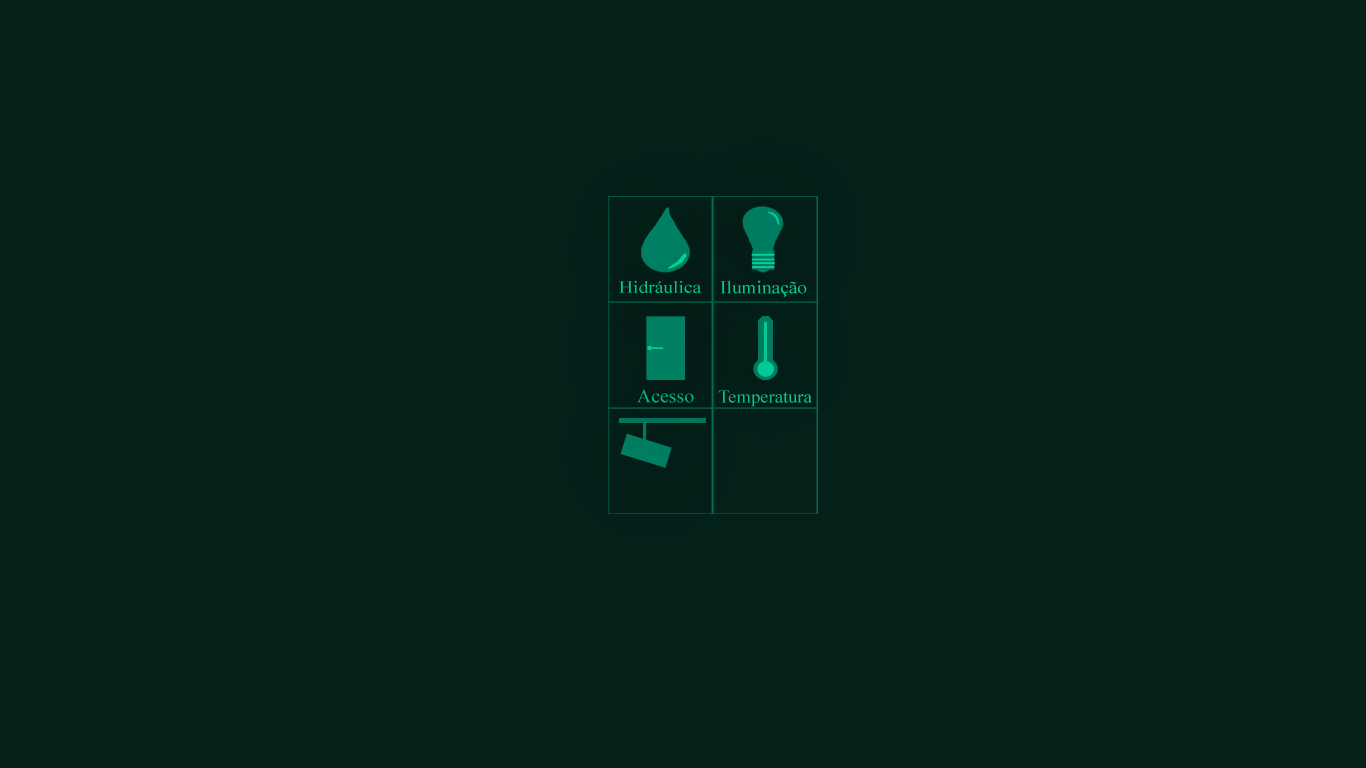
<style>
.page{position:relative;width:1366px;height:768px;background:#032019}
.page>*{position:absolute;margin:0}
.t1{font:16.8px "TimesNewRomanPSMT";color:#03d6a1;scale:1.15 1}
.t2{font:18px "TimesNewRomanPSMT";color:#03d6a1;scale:1.07 1}
.t3{font:18.5px "TimesNewRomanPSMT";color:#03b88a;scale:1.06 1}
.t4{font:17.7px "TimesNewRomanPSMT";color:#03d6a1;scale:1.05 1}
</style>
<div class="page">
<p class="t1" style="left:619px;top:281px;width:83px;height:12px">Hidráulica</p>
<p class="t2" style="left:720px;top:280px;width:87px;height:17px">Iluminação</p>
<p class="t3" style="left:637px;top:389px;width:57px;height:14px">Acesso</p>
<p class="t4" style="left:718px;top:390px;width:94px;height:17px">Temperatura</p>
</div>
